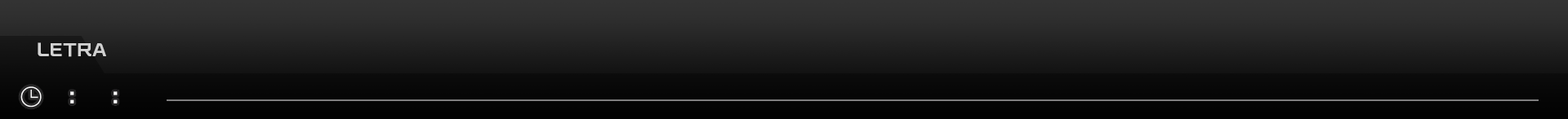
<style>
.page{position:relative;width:1568px;height:119px}
.page>*{position:absolute;margin:0}
.t1{font:15.2px "KafuTechnoStd-U";letter-spacing:0.05em;color:#d2d2d2}
</style>
<div class="page">
<p class="t1" style="left:38px;top:42px;width:68px;height:15px">LETRA</p>
</div>
